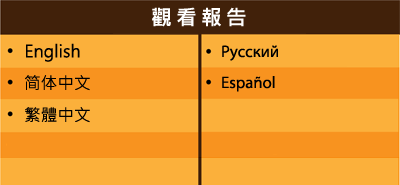
<style>
.page{position:relative;width:400px;height:185px;background:#fbb03b}
.page>*{position:absolute;margin:0}
.t1{font:20.8px "MicrosoftJhengHeiBold";letter-spacing:0.2em;color:#ffffff}
.t2{font:16.7px "MicrosoftJhengHeiRegular";color:#000000}
.t3{font:16.7px "MyriadPro-Regular";color:#000000}
</style>
<div class="page">
<p class="t1" style="left:152px;top:7px;width:94px;height:20px">觀看報告</p>
<p class="t2" style="left:26px;top:43px;width:54px;height:19px">English</p>
<p class="t3" style="left:222px;top:45px;width:56px;height:16px">Русский</p>
<p class="t2" style="left:25px;top:75px;width:65px;height:16px">简体中文</p>
<p class="t3" style="left:222px;top:76px;width:53px;height:16px">Español</p>
<p class="t2" style="left:25px;top:107px;width:65px;height:16px">繁體中文</p>
</div>
